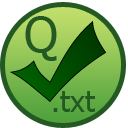
<style>
.page{position:relative;width:128px;height:128px;background:#ffffff}
.page>*{position:absolute;margin:0}
.t1{font:48px "Tahoma";color:#245923}
.t2{font:30px "Tahoma";color:#245923}
</style>
<div class="page">
<p class="t1" style="left:25px;top:16px;width:32px;height:45px">Q</p>
<p class="t2" style="left:53px;top:91px;width:42px;height:21px">.txt</p>
</div>
